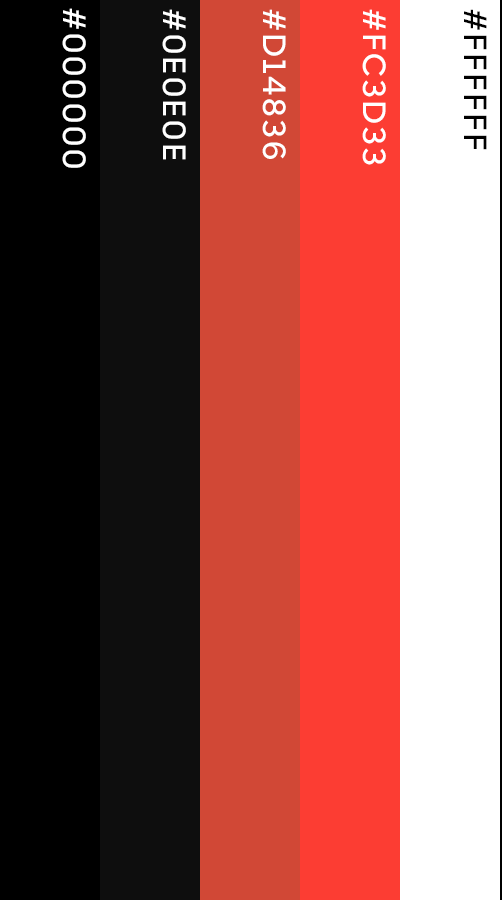
<style>
.page{position:relative;width:502px;height:902px;background:#ffffff}
.page>*{position:absolute;margin:0}
.t1{font:32px "UberMove-Medium";letter-spacing:0.1em;color:#ffffff}
.t2{font:32px "UberMove-Medium";letter-spacing:0.1em;color:#000000}
</style>
<div class="page">
<p class="t1" style="left:62px;top:8px;width:24px;height:160px;rotate:90deg">#000000</p>
<p class="t1" style="left:162px;top:9px;width:24px;height:151px;rotate:90deg">#0E0E0E</p>
<p class="t1" style="left:262px;top:9px;width:24px;height:150px;rotate:90deg">#D14836</p>
<p class="t1" style="left:362px;top:9px;width:24px;height:156px;rotate:90deg">#FC3D33</p>
<p class="t2" style="left:464px;top:9px;width:23px;height:141px;rotate:90deg">#FFFFFF</p>
</div>
